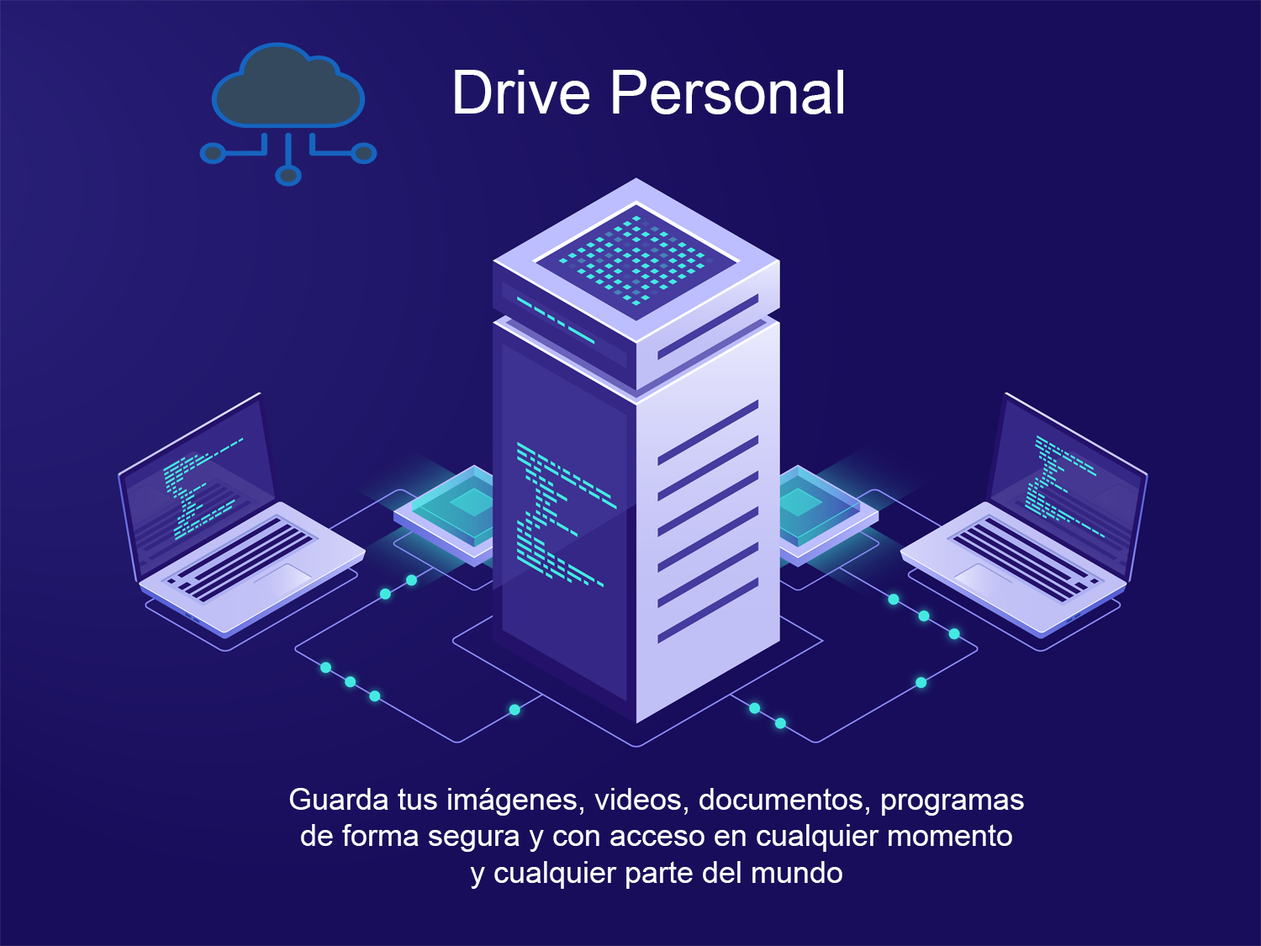
<style>
.page{position:relative;width:1261px;height:946px;background:#180d5b}
.page>*{position:absolute;margin:0}
.t1{font:60.5px "ArialMT";color:#ffffff}
.t2{font:30.3px "ArialMT";color:#ffffff}
</style>
<div class="page">
<p class="t1" style="left:455px;top:70px;width:388px;height:44px">Drive Personal</p>
<p class="t2" style="left:289px;top:788px;width:735px;height:101px;text-align:center">Guarda tus imágenes, videos, documentos, programas<br>de forma segura y con acceso en cualquier momento<br>y cualquier parte del mundo</p>
</div>
